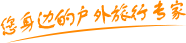
<style>
.page{position:relative;width:186px;height:43px;background:#ffffff}
.page>*{position:absolute;margin:0}
.t1{font:20.1px "CloudShuTiGBK";letter-spacing:-0.06em;color:#ff8800}
</style>
<div class="page">
<p class="t1" style="left:0px;top:0px;width:186px;height:36px;rotate:-5deg">您身边的户外旅行专家</p>
</div>
